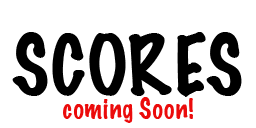
<style>
.page{position:relative;width:256px;height:128px;background:#ffffff}
.page>*{position:absolute;margin:0}
.t1{font:75px "MarkerFelt-Thin";color:#000000}
.t2{font:25px "MarkerFelt-Thin";color:#eb0b0b}
</style>
<div class="page">
<p class="t1" style="left:12px;top:32px;width:230px;height:65px">SCORES</p>
<p class="t2" style="left:63px;top:97px;width:130px;height:26px">coming Soon!</p>
</div>
